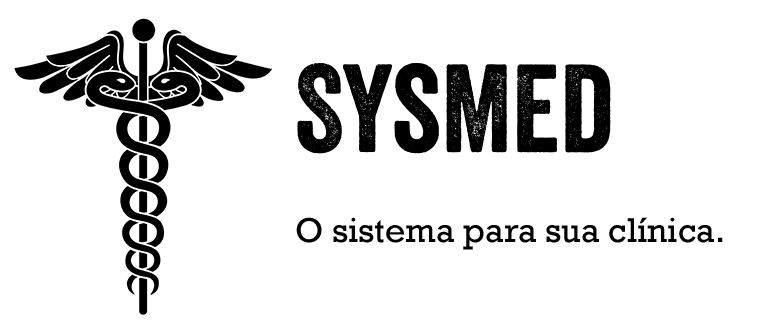
<style>
.page{position:relative;width:781px;height:331px;background:#ffffff}
.page>*{position:absolute;margin:0}
.t1{font:121.5px "Veneer";color:#000000}
.t2{font:35px "Rockwell";color:#000000}
</style>
<div class="page">
<p class="t1" style="left:297px;top:63px;width:314px;height:91px">SysMed</p>
<p class="t2" style="left:296px;top:217px;width:427px;height:33px">O sistema para sua clínica.</p>
</div>
